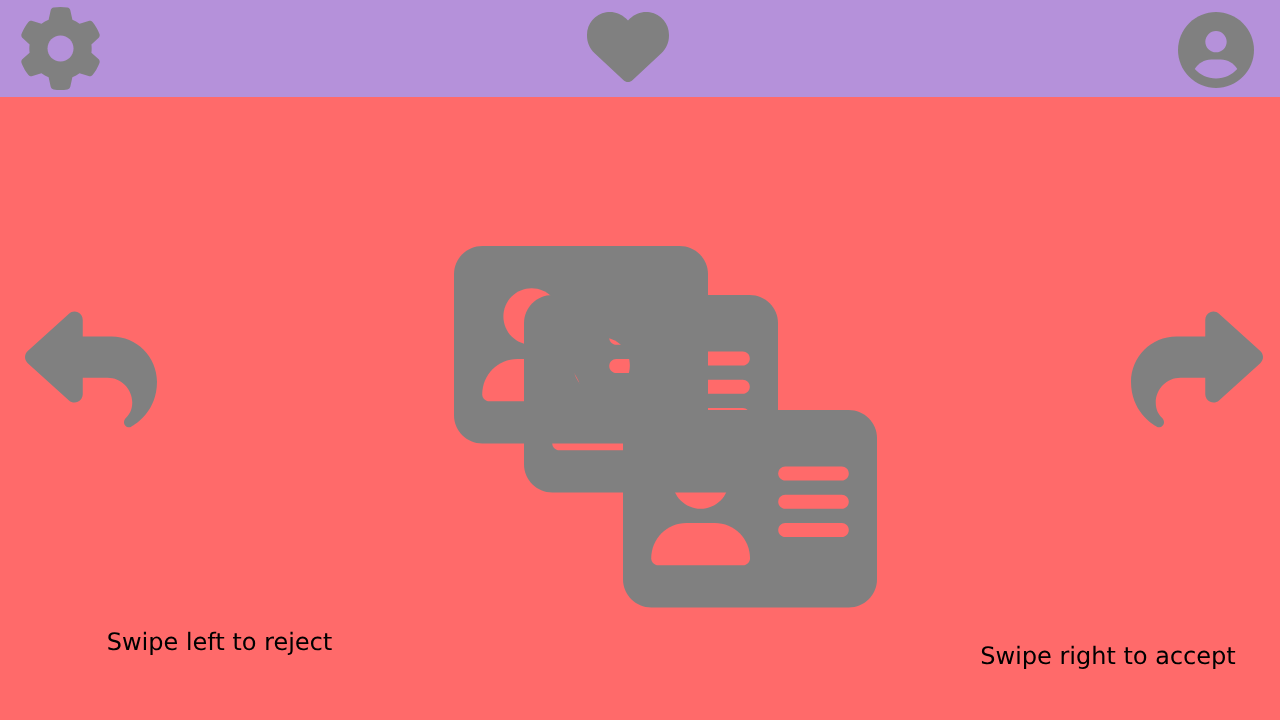
<style>
.page{position:relative;width:1280px;height:720px;background:#ff6a6a}
.page>*{position:absolute;margin:0}
.t1{font:24px "DejaVuSans";color:#000000}
</style>
<div class="page">
<p class="t1" style="left:108px;top:631px;width:224px;height:24px">Swipe left to reject</p>
<p class="t1" style="left:981px;top:645px;width:255px;height:24px">Swipe right to accept</p>
</div>
